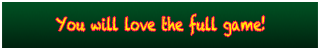
<style>
.page{position:relative;width:320px;height:50px}
.page>*{position:absolute;margin:0}
.t1{font:17px "Chalkduster";color:#fff200;scale:0.74 1}
</style>
<div class="page">
<p class="t1" style="left:56px;top:14px;width:209px;height:23px">You will love the full game!</p>
</div>
